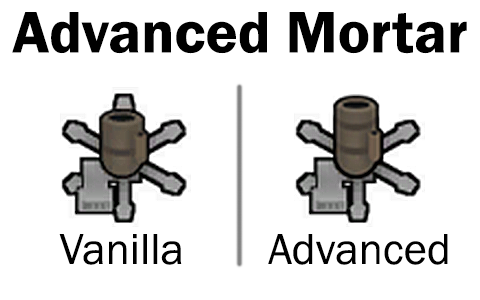
<style>
.page{position:relative;width:480px;height:300px;background:#ffffff}
.page>*{position:absolute;margin:0}
.t1{font:60.6px "FranklinGothic-Demi";color:#000000}
.t2{font:44.6px "FranklinGothic-Book";color:#000000}
</style>
<div class="page">
<p class="t1" style="left:12px;top:12px;width:455px;height:42px">Advanced Mortar</p>
<p class="t2" style="left:59px;top:234px;width:123px;height:31px">Vanilla</p>
<p class="t2" style="left:268px;top:234px;width:180px;height:31px">Advanced</p>
</div>
